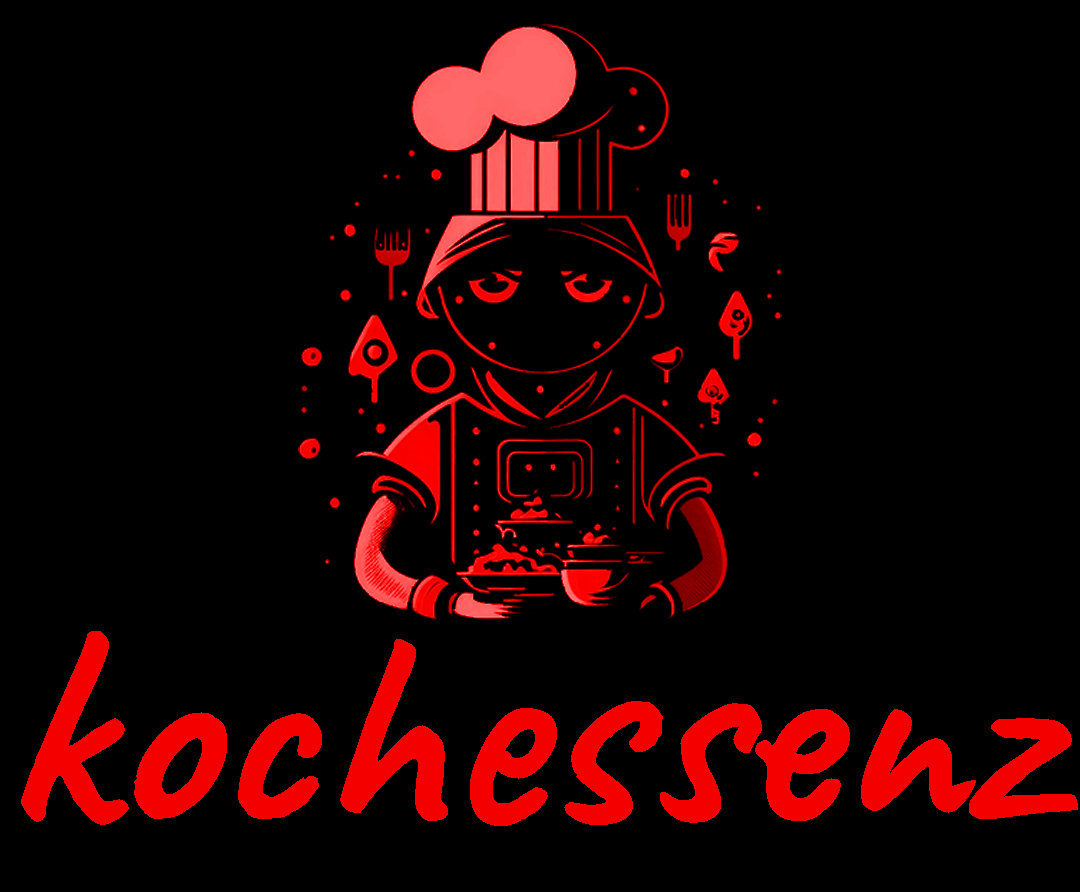
<style>
.page{position:relative;width:1080px;height:892px;background:#000000}
.page>*{position:absolute;margin:0}
.t1{font:283.3px "Caveat-Bold";color:#f40000}
</style>
<div class="page">
<p class="t1" style="left:21px;top:631px;width:1057px;height:195px">kochessenz</p>
</div>
